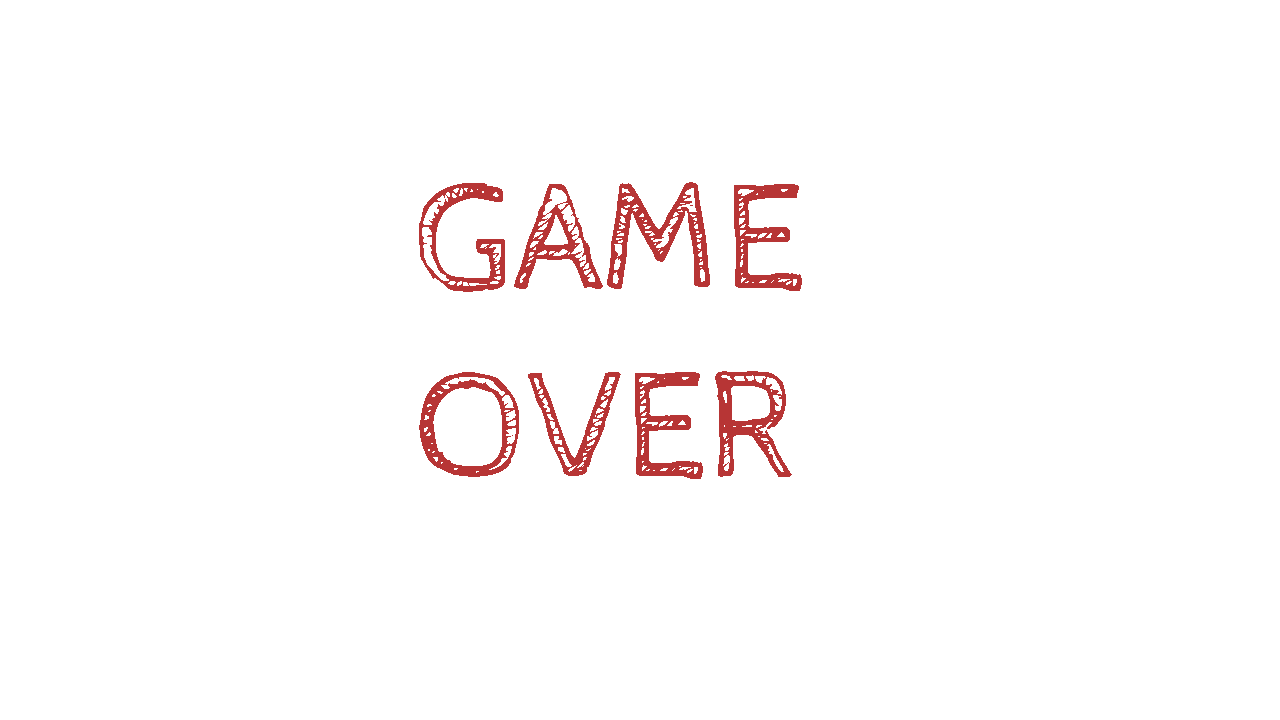
<style>
.page{position:relative;width:1280px;height:720px;background:#ffffff}
.page>*{position:absolute;margin:0}
.t1{font:156.3px "CabinSketch-Regular";color:#b73535}
</style>
<div class="page">
<p class="t1" style="left:419px;top:182px;width:383px;height:297px">GAME<br>OVER</p>
</div>
